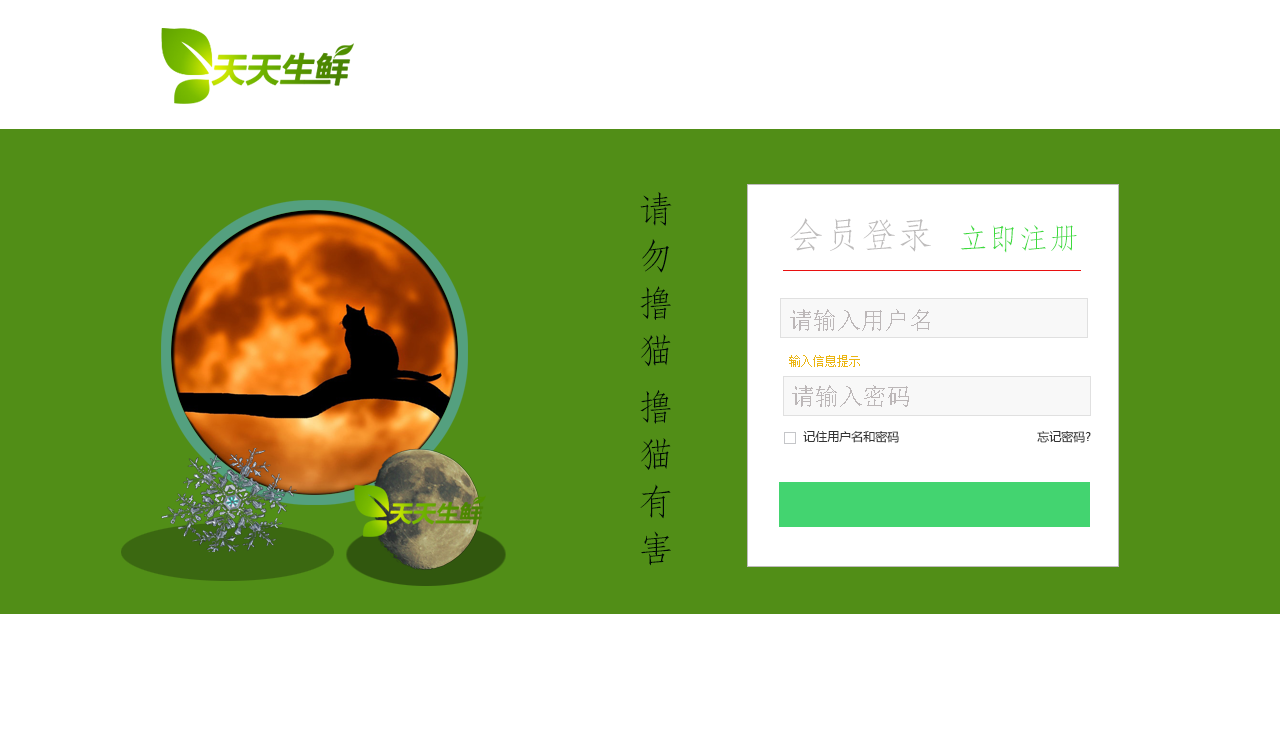
<style>
.page{position:relative;width:1280px;height:729px;background:#ffffff}
.page>*{position:absolute;margin:0}
.t1{font:36px "STFangsong";letter-spacing:0.01em;color:#000905}
.t2{font:36px "STFangsong";letter-spacing:0.01em;color:#bebcbc}
.t3{font:30px "STFangsong";letter-spacing:0.01em;color:#3dda3d}
.t4{font:24px "SimSun";color:#bcb7b8}
.t5{font:12px "SimSun";color:#ebb511}
.t6{font:12px "MicrosoftYaHei";color:#333333}
</style>
<div class="page">
<p class="t1" style="left:640px;top:192px;width:32px;height:374px">请勿撸猫 撸猫有害</p>
<p class="t2" style="left:790px;top:218px;width:141px;height:34px">会员登录</p>
<p class="t3" style="left:960px;top:225px;width:117px;height:28px">立即注册</p>
<p class="t4" style="left:790px;top:309px;width:140px;height:22px">请输入用户名</p>
<p class="t5" style="left:789px;top:355px;width:71px;height:12px">输入信息提示</p>
<p class="t4" style="left:792px;top:385px;width:117px;height:22px">请输入密码</p>
<p class="t6" style="left:803px;top:431px;width:96px;height:12px">记住用户名和密码</p>
<p class="t6" style="left:1037px;top:431px;width:54px;height:12px">忘记密码?</p>
</div>
